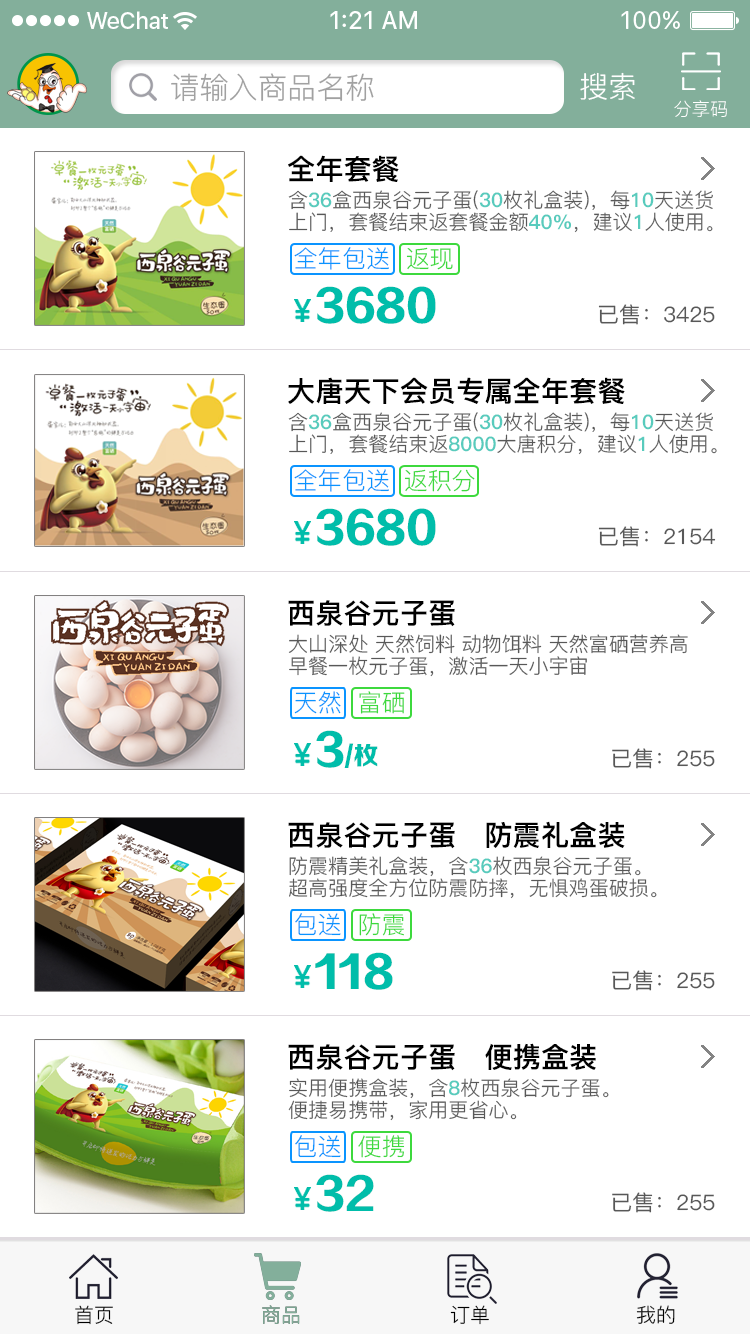
<style>
.page{position:relative;width:750px;height:1334px;background:#ffffff}
.page>*{position:absolute;margin:0}
.t1{font:29.8px "PingFang-SC-Regular";color:#a1a1a1}
.t2{font:29.4px "PingFang-SC-Regular";color:#ffffff}
.t3{font:18.3px "PingFang-SC-Regular";color:#ffffff;text-transform:uppercase}
.t4{font:28.1px "PingFang-SC-Heavy";color:#000000}
.t5{font:20px/21.8px "PingFang-SC-Regular"}
.t6{font:20px/21.8px "PingFang-SC-Heavy"}
.t7{font:24px "PingFang-SC-Regular";color:#0a94ff}
.t8{font:24px "PingFang-SC-Regular";color:#3dd93d}
.t9{font:42.4px "FZZDHJW--GB1-0";color:#00bdaa}
.t10{font:21.3px "PingFang-SC-Medium";color:#585858}
.t11{font:20px/21.8px "PingFang-SC-Regular";color:#585858}
.t12{font:25px "FZZDHJW--GB1-0";color:#00bdaa}
.t13{font:20px/21.8px "PingFang-SC-Heavy";color:#585858}
.t14{font:20px "PingFang-SC-Regular";color:#000000;text-transform:uppercase}
.t15{font:20px "PingFang-SC-Regular";color:#83af9b;text-transform:uppercase}
</style>
<div class="page">
<p class="t1" style="left:171px;top:73px;width:203px;height:29px">请输入商品名称</p>
<p class="t2" style="left:580px;top:72px;width:55px;height:28px">搜索</p>
<p class="t3" style="left:674px;top:100px;width:53px;height:17px">分享码</p>
<p class="t4" style="left:288px;top:155px;width:111px;height:27px">全年套餐</p>
<p class="t5" style="left:288px;top:190px;width:425px;height:43px">含<span class="t6">36</span>盒西泉谷元子蛋(<span class="t6">30</span>枚礼盒装)，每<span class="t6">10</span>天送货<br>上门，套餐结束返套餐金额<span class="t6">40%</span>，建议<span class="t6">1</span>人使用。</p>
<p class="t7" style="left:294px;top:247px;width:95px;height:23px">全年包送</p>
<p class="t8" style="left:406px;top:247px;width:47px;height:23px">返现</p>
<p class="t9" style="left:316px;top:286px;width:120px;height:38px">3680</p>
<p class="t10" style="left:598px;top:304px;width:117px;height:21px">已售：3425</p>
<p class="t4" style="left:288px;top:377px;width:337px;height:27px">大唐天下会员专属全年套餐</p>
<p class="t5" style="left:288px;top:412px;width:429px;height:43px">含<span class="t6">36</span>盒西泉谷元子蛋(<span class="t6">30</span>枚礼盒装)，每<span class="t6">10</span>天送货<br>上门，套餐结束返<span class="t6">8000</span>大唐积分，建议<span class="t6">1</span>人使用。</p>
<p class="t7" style="left:294px;top:469px;width:95px;height:23px">全年包送</p>
<p class="t8" style="left:404px;top:469px;width:71px;height:23px">返积分</p>
<p class="t9" style="left:316px;top:508px;width:120px;height:38px">3680</p>
<p class="t10" style="left:598px;top:526px;width:118px;height:21px">已售：2154</p>
<p class="t4" style="left:288px;top:600px;width:167px;height:27px">西泉谷元子蛋</p>
<p class="t11" style="left:288px;top:634px;width:400px;height:43px">大山深处 天然饲料 动物饵料 天然富硒营养高<br>早餐一枚元子蛋，激活一天小宇宙</p>
<p class="t7" style="left:294px;top:691px;width:47px;height:23px">天然</p>
<p class="t8" style="left:359px;top:691px;width:46px;height:23px">富硒</p>
<p class="t12" style="left:316px;top:730px;width:62px;height:38px"><span class="t9">3</span>/枚</p>
<p class="t10" style="left:612px;top:748px;width:103px;height:21px">已售：255</p>
<p class="t4" style="left:288px;top:821px;width:337px;height:28px">西泉谷元子蛋   防震礼盒装</p>
<p class="t11" style="left:289px;top:856px;width:368px;height:43px">防震精美礼盒装，含<span class="t13">36</span>枚西泉谷元子蛋。<br>超高强度全方位防震防摔，无惧鸡蛋破损。</p>
<p class="t7" style="left:295px;top:913px;width:46px;height:23px">包送</p>
<p class="t8" style="left:359px;top:913px;width:45px;height:23px">防震</p>
<p class="t9" style="left:315px;top:952px;width:78px;height:38px">118</p>
<p class="t10" style="left:612px;top:970px;width:103px;height:21px">已售：255</p>
<p class="t4" style="left:288px;top:1043px;width:308px;height:28px">西泉谷元子蛋   便携盒装</p>
<p class="t11" style="left:288px;top:1078px;width:321px;height:43px">实用便携盒装，含<span class="t13">8</span>枚西泉谷元子蛋。<br>便捷易携带，家用更省心。</p>
<p class="t7" style="left:295px;top:1135px;width:46px;height:23px">包送</p>
<p class="t8" style="left:358px;top:1135px;width:47px;height:23px">便携</p>
<p class="t9" style="left:316px;top:1174px;width:58px;height:38px">32</p>
<p class="t10" style="left:612px;top:1192px;width:103px;height:21px">已售：255</p>
<p class="t14" style="left:75px;top:1305px;width:38px;height:20px">首页</p>
<p class="t15" style="left:262px;top:1305px;width:38px;height:19px">商品</p>
<p class="t15" style="left:262px;top:1305px;width:38px;height:19px">商品</p>
<p class="t14" style="left:450px;top:1305px;width:39px;height:20px">订单</p>
<p class="t14" style="left:636px;top:1305px;width:39px;height:19px">我的</p>
</div>
